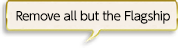
<style>
.page{position:relative;width:178px;height:48px;background:#f6efe6}
.page>*{position:absolute;margin:0}
.t1{font:12px "UDShinGoPro-Medium";letter-spacing:-0.04em;color:#000000}
</style>
<div class="page">
<p class="t1" style="left:16px;top:10px;width:154px;height:14px">Remove all but the Flagship</p>
</div>
